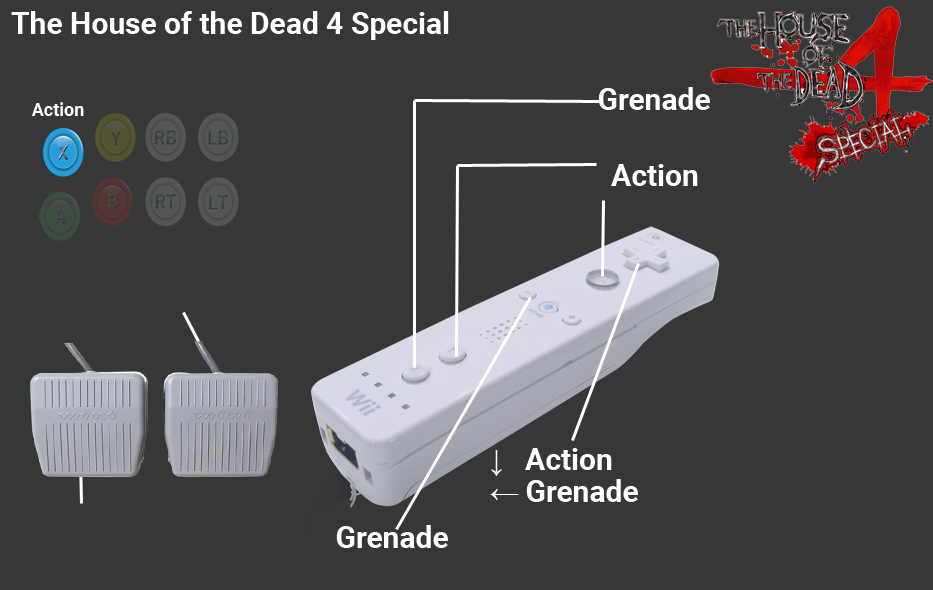
<style>
.page{position:relative;width:933px;height:590px;background:#363838}
.page>*{position:absolute;margin:0}
.t1{font:30px "Roboto-Bold";color:#ffffff}
.t2{font:18px "Roboto-Bold";color:#ffffff}
.t3{font:30px "MicrosoftSansSerif";color:#ffffff}
</style>
<div class="page">
<p class="t1" style="left:11px;top:11px;width:438px;height:29px">The House of the Dead 4 Special</p>
<p class="t1" style="left:598px;top:87px;width:112px;height:23px">Grenade</p>
<p class="t2" style="left:31px;top:102px;width:53px;height:14px">Action</p>
<p class="t1" style="left:611px;top:164px;width:87px;height:22px">Action</p>
<p class="t1" style="left:491px;top:448px;width:121px;height:28px"><span class="t3">↓ </span>Action</p>
<p class="t1" style="left:490px;top:479px;width:148px;height:23px"><span class="t3">← </span>Grenade</p>
<p class="t1" style="left:336px;top:525px;width:112px;height:23px">Grenade</p>
</div>
